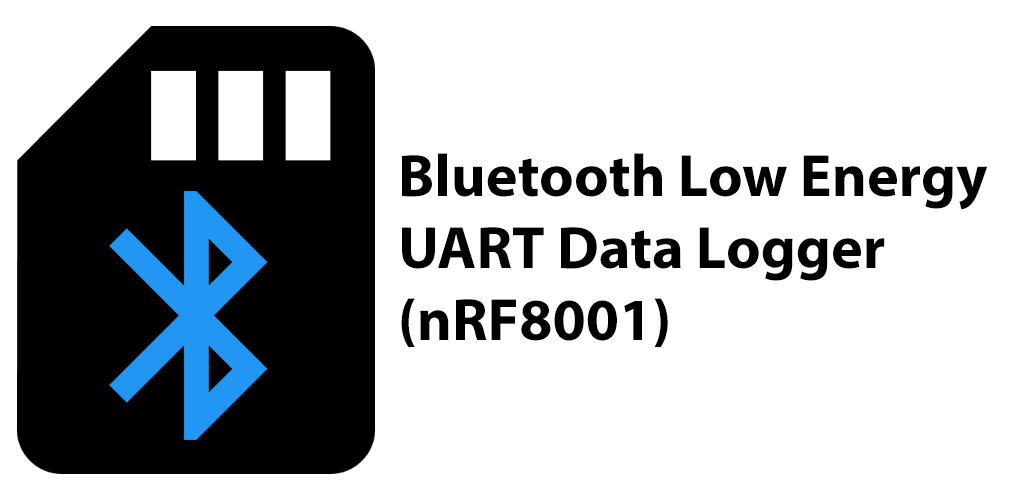
<style>
.page{position:relative;width:1024px;height:500px;background:#ffffff}
.page>*{position:absolute;margin:0}
.t1{font:60px "MyriadPro-Bold";color:#000000}
</style>
<div class="page">
<p class="t1" style="left:401px;top:153px;width:587px;height:194px">Bluetooth Low Energy<br>UART Data Logger<br>(nRF8001)</p>
</div>
